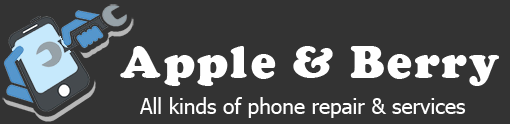
<style>
.page{position:relative;width:510px;height:124px;background:#333333}
.page>*{position:absolute;margin:0}
.t1{font:43.9px "CoopaBlacka";color:#ffffff}
.t2{font:20.9px "Tahoma";color:#ffffff}
</style>
<div class="page">
<p class="t1" style="left:120px;top:46px;width:379px;height:40px">Apple &amp; Berry</p>
<p class="t2" style="left:140px;top:97px;width:326px;height:21px">All kinds of phone repair &amp; services</p>
</div>
